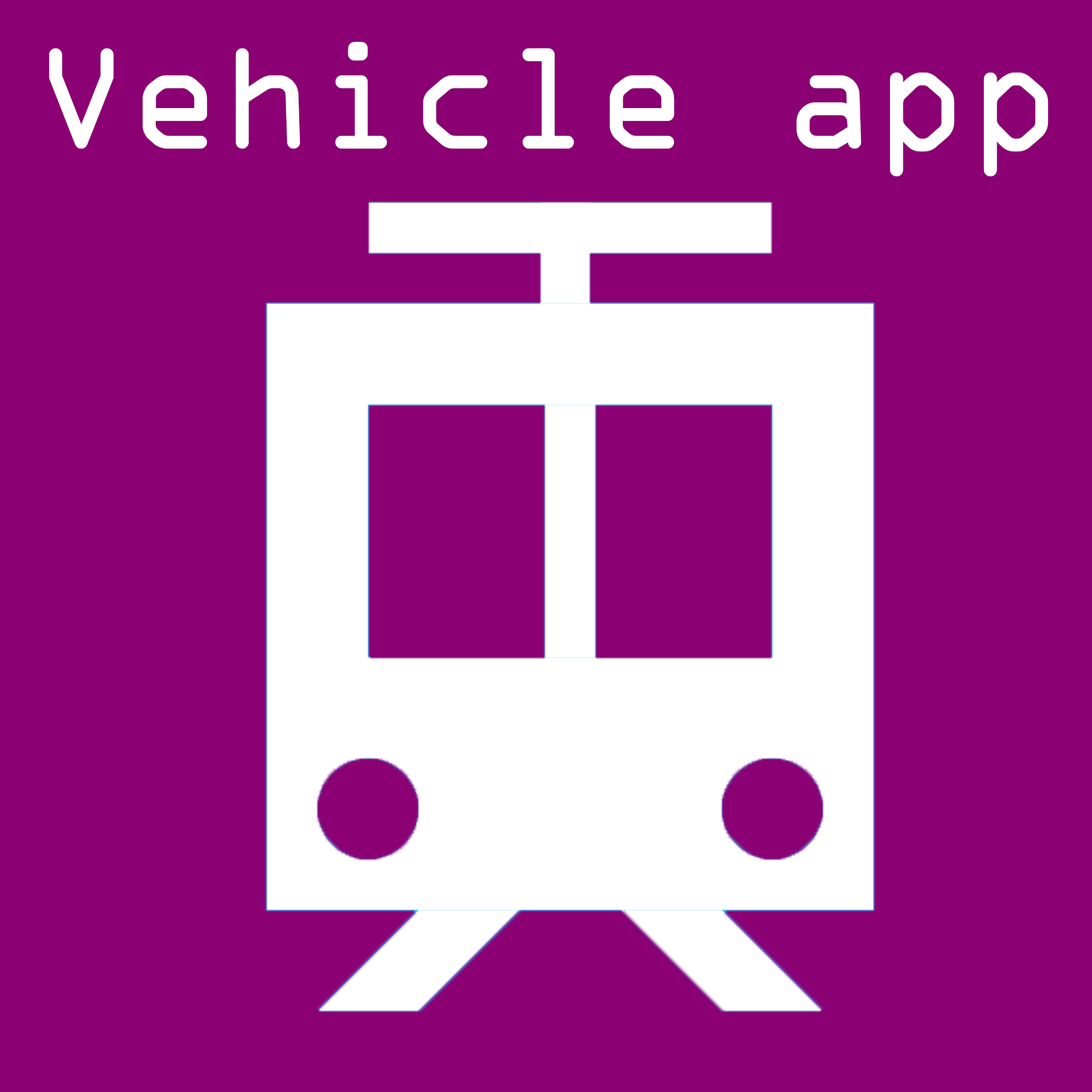
<style>
.page{position:relative;width:1092px;height:1092px;background:#8b0073}
.page>*{position:absolute;margin:0}
.t1{font:154.7px "OCRAExtended";color:#ffffff}
</style>
<div class="page">
<p class="t1" style="left:49px;top:41px;width:1000px;height:135px">Vehicle app</p>
</div>
